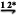
<style>
.page{position:relative;width:16px;height:16px;background:#ffffff}
.page>*{position:absolute;margin:0}
.t1{font:9px "Times-Bold";color:#000000}
</style>
<div class="page">
<p class="t1" style="left:1px;top:1px;width:15px;height:7px">1 2*</p>
</div>
